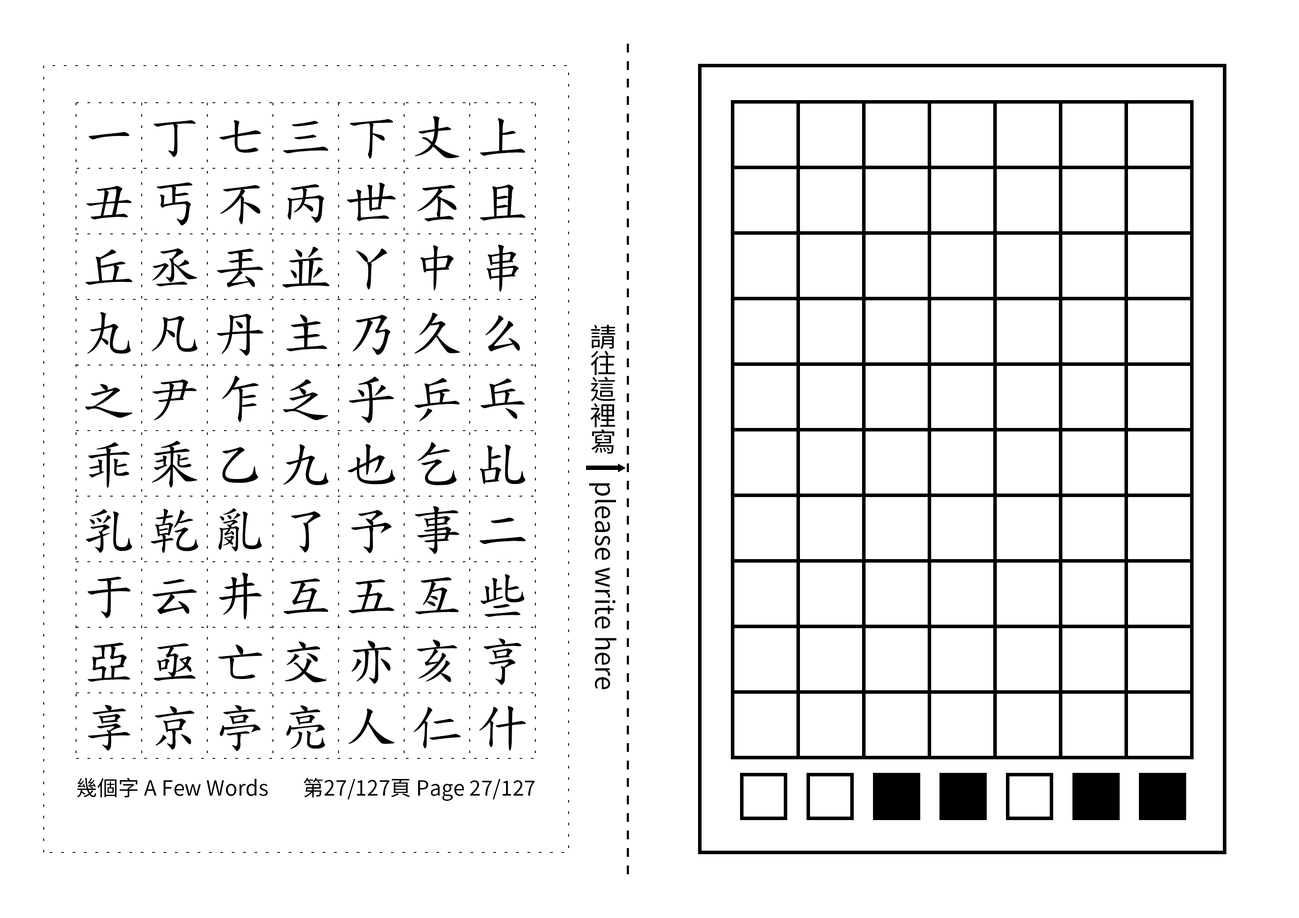
<style>
.page{position:relative;width:1299px;height:918px;background:#ffffff}
.page>*{position:absolute;margin:0}
.t1{font:52.5px/65.6px "TW-Kai-98_1";letter-spacing:0.25em;color:#000000}
.t2{font:26.2px "SourceHanSansTC-Regular";color:#000000}
.t3{font:21px "SourceHanSansTC-Regular";color:#000000}
</style>
<div class="page">
<p class="t1" style="left:85px;top:116px;width:441px;height:636px;text-align:center">一丁七三下丈上丑丐不丙世丕且丘丞丟並丫中串丸凡丹主乃久么之尹乍乏乎乒乓乖乘乙九也乞乩乳乾亂了予事二于云井互五亙些亞亟亡交亦亥亨享京亭亮人仁什</p>
<p class="t2" style="left:589px;top:324px;width:28px;height:366px;text-align:center">請往這裡寫　please write here</p>
<p class="t3" style="left:77px;top:778px;width:191px;height:20px">幾個字 A Few Words</p>
<p class="t3" style="left:303px;top:778px;width:232px;height:23px">第27/127頁 Page 27/127</p>
</div>
